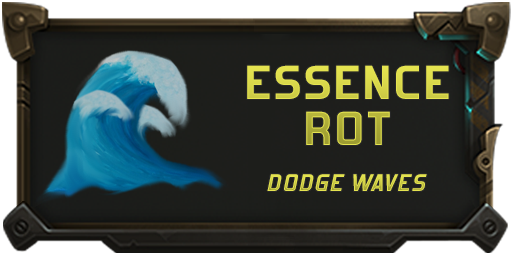
<style>
.page{position:relative;width:512px;height:256px}
.page>*{position:absolute;margin:0}
.t1{font:52.8px/46px "ForgottenFuturist-Bold";letter-spacing:0.02em;color:#d9d84b;text-transform:uppercase;scale:1.18 1}
.t2{font:26.4px "ForgottenFuturist-BoldItalic";letter-spacing:0.02em;color:#dad94b;text-transform:uppercase;scale:1.18 1}
</style>
<div class="page">
<p class="t1" style="left:247px;top:65px;width:202px;height:80px;text-align:center">ESSENCE<br>ROT</p>
<p class="t2" style="left:267px;top:174px;width:160px;height:17px">dodge waves</p>
</div>
